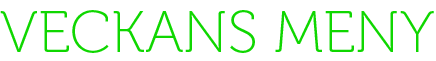
<style>
.page{position:relative;width:436px;height:61px;background:#ffffff}
.page>*{position:absolute;margin:0}
.t1{font:59px "Museo100-Regular";color:#0fd700;text-transform:uppercase}
</style>
<div class="page">
<p class="t1" style="left:0px;top:10px;width:434px;height:43px">Veckans meny</p>
</div>
